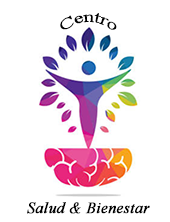
<style>
.page{position:relative;width:170px;height:222px;background:#ffffff}
.page>*{position:absolute;margin:0}
.t1{font:15.6px "TimesNewRomanPSMT";color:#000000}
.t2{font:15.6px "TimesNewRomanPS-ItalicMT";color:#000000;font-weight:bold}
</style>
<div class="page">
<p class="t1" style="left:60px;top:13px;width:57px;height:17px">Centro</p>
<p class="t2" style="left:27px;top:202px;width:123px;height:12px">Salud &amp; Bienestar</p>
</div>
